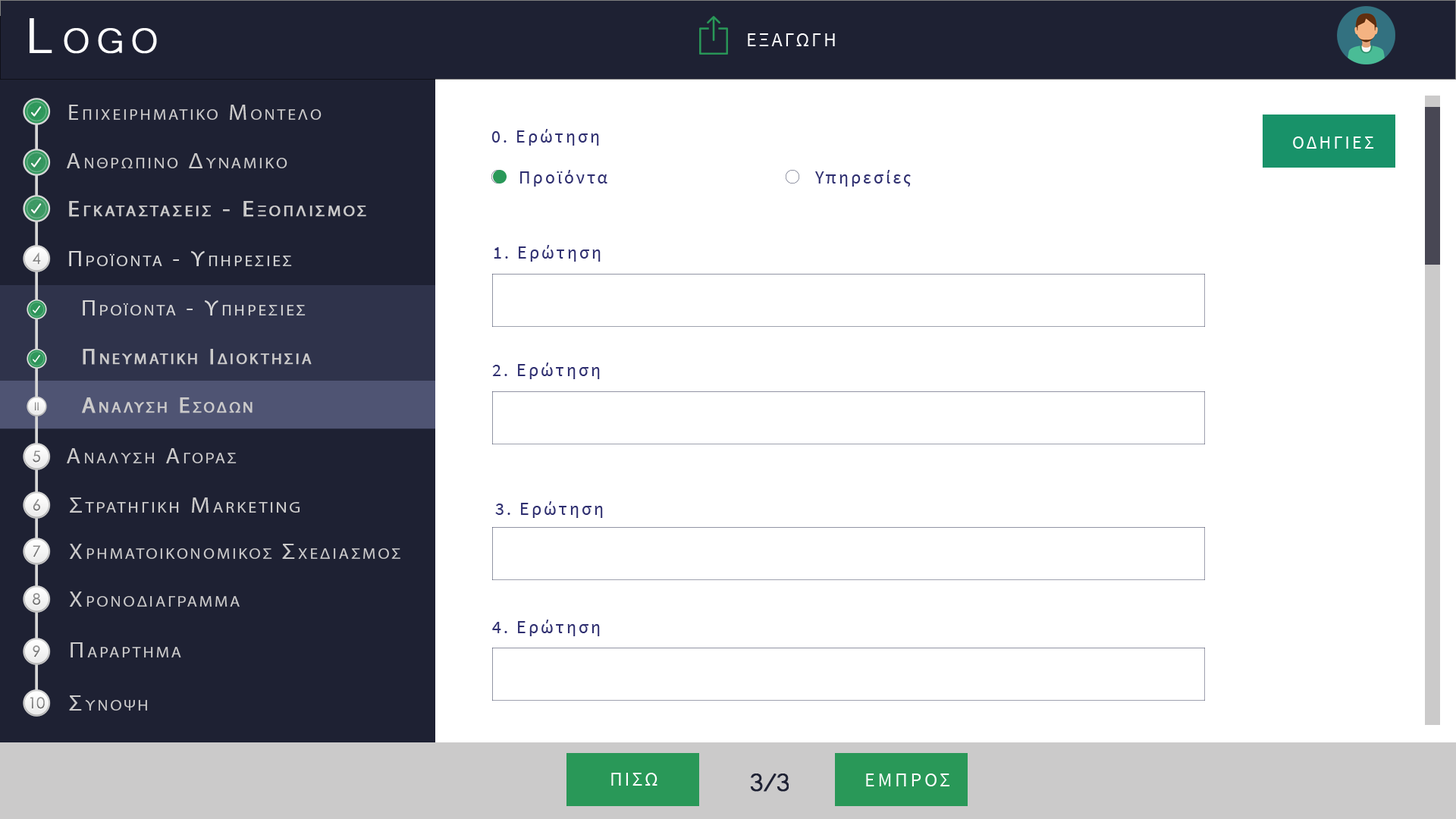
<style>
.page{position:relative;width:1456px;height:819px;background:#ffffff}
.page>*{position:absolute;margin:0}
.t1{font:63.7px "Microsoft-Yi-Baiti";letter-spacing:0.13em;color:#ffffff;font-variant:small-caps;font-weight:bold}
.t2{font:20px "SourceSansPro-Regular";letter-spacing:0.1em;color:#fefefe;text-transform:uppercase}
.t3{font:21.7px "MyriadPro-Regular";letter-spacing:0.13em;color:#cbcaca;font-variant:small-caps;scale:1.09 1}
.t4{font:23.4px "Microsoft-Yi-Baiti";letter-spacing:0.13em;color:#cbcaca;font-variant:small-caps;font-weight:bold}
.t5{font:18.2px "SourceSansPro-Regular";letter-spacing:0.13em;color:#2f2f70}
.t6{font:18.2px "SourceSansPro-Regular";letter-spacing:0.13em;color:#2f2f70;text-transform:uppercase}
.t7{font:18.2px "SourceSansPro-Regular";letter-spacing:0.13em;color:#ffffff;text-transform:uppercase}
.t8{font:21.7px/91px "MyriadPro-Regular";letter-spacing:0.13em;color:#cbcaca;font-variant:small-caps;font-weight:bold;scale:1.09 1}
.t9{font:23.4px/91px "Microsoft-Yi-Baiti";letter-spacing:0.13em;color:#cbcaca;font-variant:small-caps;font-weight:bold}
.t10{font:15.3px "CenturyGothic";color:#878787}
.t11{font:21.7px "MyriadPro-Regular";letter-spacing:0.13em;color:#d6d6d6;font-variant:small-caps;scale:1.09 1}
.t12{font:23.4px "Microsoft-Yi-Baiti";letter-spacing:0.13em;color:#d6d6d6;font-variant:small-caps;font-weight:bold}
.t13{font:22.3px "MyriadPro-Regular";letter-spacing:0.13em;color:#cbcaca;font-variant:small-caps;font-weight:bold}
.t14{font:11.2px "CenturyGothic";color:#828282}
.t15{font:15.3px "CenturyGothic";color:#898989}
.t16{font:22.2px "MyriadPro-Regular";letter-spacing:0.13em;color:#cbcaca;font-variant:small-caps;scale:1.09 1}
.t17{font:25.5px "Microsoft-Yi-Baiti";letter-spacing:0.13em;color:#cbcaca;font-variant:small-caps;font-weight:bold}
.t18{font:15.3px "CenturyGothic";color:#838383}
.t19{font:15.3px "CenturyGothic";color:#888888}
.t20{font:15.3px "CenturyGothic";color:#8b8b8b}
.t21{font:23.7px "Microsoft-Yi-Baiti";letter-spacing:0.13em;color:#cbcaca;font-variant:small-caps;scale:1.09 1}
.t22{font:32.8px "Microsoft-Yi-Baiti";letter-spacing:-0.1em;color:#1e2133;font-weight:bold}
.t23{font:20px "SourceSansPro-Regular";letter-spacing:0.13em;color:#fefefe;text-transform:uppercase}
</style>
<div class="page">
<p class="t1" style="left:30px;top:18px;width:127px;height:36px">Logo</p>
<p class="t2" style="left:748px;top:33px;width:87px;height:13px">εξαγωγη</p>
<p class="t3" style="left:69px;top:105px;width:253px;height:15px"><span class="t4">   </span>Επιχειρηματικο Μοντελο</p>
<p class="t5" style="left:492px;top:129px;width:107px;height:17px"><span class="t6">0. </span>Ερώτηση</p>
<p class="t7" style="left:1293px;top:136px;width:81px;height:13px">Οδηγιεσ</p>
<p class="t3" style="left:67px;top:153px;width:220px;height:15px"><span class="t4">   </span>Ανθρωπινο Δυναμικο</p>
<p class="t5" style="left:520px;top:170px;width:87px;height:17px">Προϊόντα</p>
<p class="t5" style="left:815px;top:170px;width:96px;height:17px">Υπηρεσίες</p>
<p class="t8" style="left:69px;top:201px;width:297px;height:16px"><span class="t9">   </span>Εγκαταστασεισ - Εξοπλισμοσ<br><br><span class="t9">Equipment</span></p>
<p class="t5" style="left:494px;top:245px;width:107px;height:17px"><span class="t6">1. </span>Ερώτηση</p>
<p class="t10" style="left:33px;top:253px;width:8px;height:12px">4</p>
<p class="t11" style="left:69px;top:251px;width:223px;height:15px"><span class="t12">   </span>Προϊοντα - Υπηρεσιεσ</p>
<p class="t11" style="left:83px;top:300px;width:223px;height:15px"><span class="t12">   </span>Προϊοντα - Υπηρεσιεσ</p>
<p class="t13" style="left:83px;top:349px;width:229px;height:16px">Πνευματικη Ιδιοκτησια</p>
<p class="t5" style="left:492px;top:362px;width:108px;height:17px"><span class="t6">2. </span>Ερώτηση</p>
<p class="t14" style="left:35px;top:402px;width:4px;height:9px">II</p>
<p class="t13" style="left:82px;top:397px;width:171px;height:16px">Αναλυση Εσοδων</p>
<p class="t3" style="left:67px;top:448px;width:170px;height:15px"><span class="t4">   </span>Αναλυση Αγορασ</p>
<p class="t15" style="left:33px;top:450px;width:7px;height:13px">5</p>
<p class="t16" style="left:70px;top:497px;width:230px;height:16px"><span class="t17">   </span>Στρατηγικη Marketing</p>
<p class="t18" style="left:33px;top:499px;width:7px;height:12px">6</p>
<p class="t5" style="left:495px;top:501px;width:108px;height:17px"><span class="t6">3. </span>Ερώτηση</p>
<p class="t19" style="left:33px;top:545px;width:8px;height:12px">7</p>
<p class="t3" style="left:69px;top:544px;width:331px;height:15px"><span class="t17">   </span>Χρηματοικονομικοσ Σχεδιασμοσ</p>
<p class="t20" style="left:33px;top:593px;width:8px;height:12px">8</p>
<p class="t3" style="left:69px;top:591px;width:171px;height:16px"><span class="t17">   </span>Χρονοδιαγραμμα</p>
<p class="t5" style="left:492px;top:620px;width:108px;height:16px"><span class="t6">4. </span>Ερώτηση</p>
<p class="t18" style="left:33px;top:645px;width:7px;height:12px">9</p>
<p class="t3" style="left:71px;top:642px;width:110px;height:15px"><span class="t21">   </span>Παραρτημα</p>
<p class="t10" style="left:30px;top:697px;width:15px;height:12px">10</p>
<p class="t3" style="left:69px;top:695px;width:78px;height:16px"><span class="t21">   </span>Συνοψη</p>
<p class="t2" style="left:611px;top:773px;width:46px;height:13px">Πισω</p>
<p class="t22" style="left:750px;top:773px;width:39px;height:19px">3/3</p>
<p class="t23" style="left:866px;top:773px;width:83px;height:13px">εμπροσ</p>
</div>
